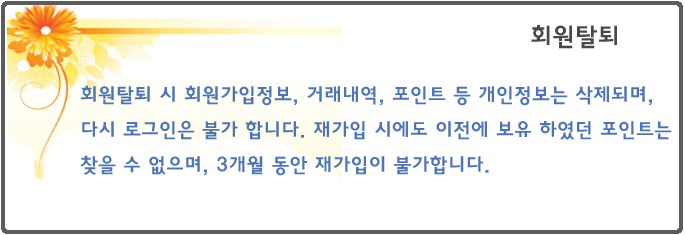
<style>
.page{position:relative;width:685px;height:235px;background:#ffffff}
.page>*{position:absolute;margin:0}
.t1{font:25px "HaanYGodic24";color:#494949}
.t2{font:20px "HaanYGodic24";color:#4c74b6}
</style>
<div class="page">
<p class="t1" style="left:531px;top:25px;width:86px;height:24px">회원탈퇴</p>
<p class="t2" style="left:80px;top:85px;width:592px;height:91px">회원탈퇴 시 회원가입정보, 거래내역, 포인트 등 개인정보는 삭제되며, 다시 로그인은 불가 합니다. 재가입 시에도 이전에 보유 하였던 포인트는 찾을 수 없으며, 3개월 동안 재가입이 불가합니다.</p>
</div>
